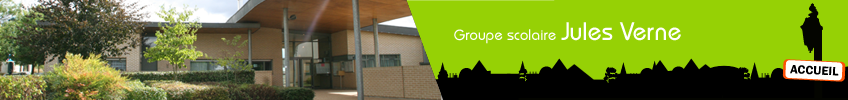
<style>
.page{position:relative;width:848px;height:100px;background:#96d105}
.page>*{position:absolute;margin:0}
.t1{font:15px "DynameSSK";color:#ffffff}
.t2{font:25px "DynameSSK";color:#ffffff}
</style>
<div class="page">
<p class="t1" style="left:454px;top:22px;width:227px;height:22px">Groupe scolaire <span class="t2">Jules Verne</span></p>
</div>
